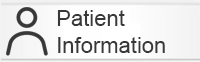
<style>
.page{position:relative;width:200px;height:62px}
.page>*{position:absolute;margin:0}
.t1{font:22px "ArialMT";color:#383838}
</style>
<div class="page">
<p class="t1" style="left:57px;top:10px;width:108px;height:43px;text-align:right">Patient<br>Information</p>
</div>
